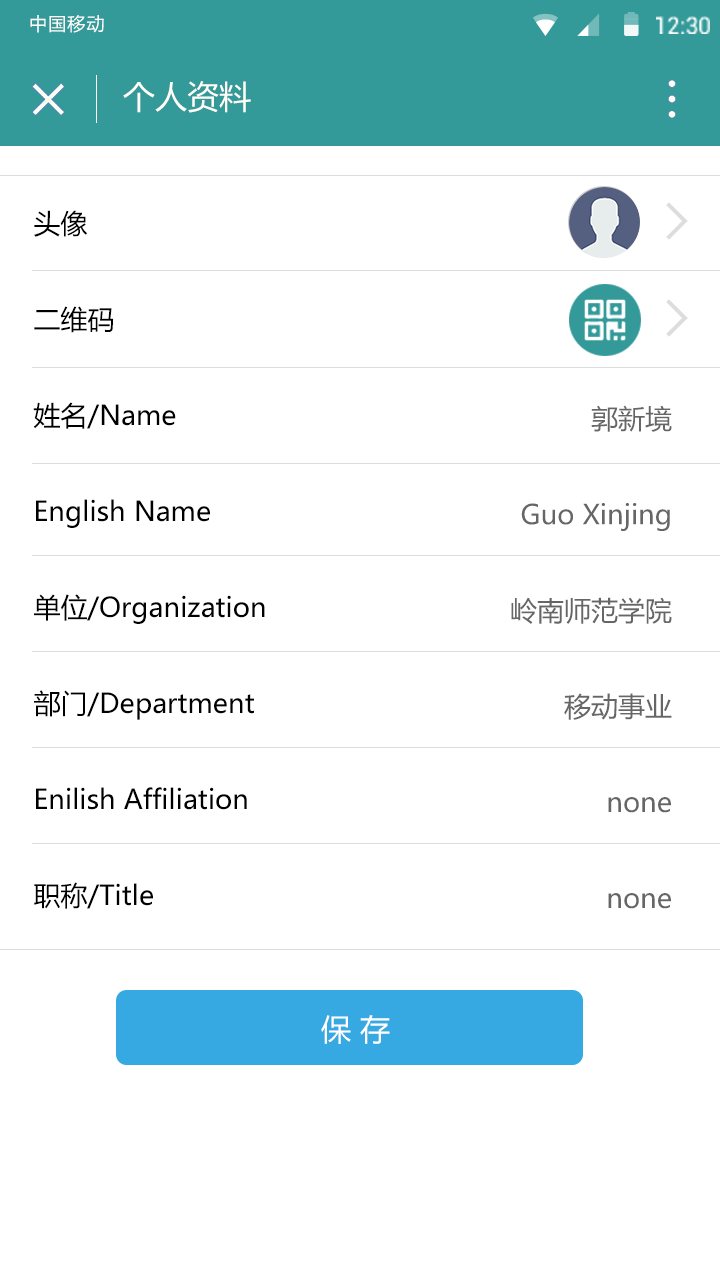
<style>
.page{position:relative;width:720px;height:1280px;background:#ffffff}
.page>*{position:absolute;margin:0}
.t1{font:17.9px "MicrosoftYaHei";letter-spacing:0.065em;color:#ffffff}
.t2{font:32px "MicrosoftYaHei";color:#fefdf8}
.t3{font:27px/96px "MicrosoftYaHei";color:#000000}
.t4{font:27px/96px "MicrosoftYaHei";color:#666666}
.t5{font:30px "MicrosoftYaHei";color:#ffffff}
</style>
<div class="page">
<p class="t1" style="left:30px;top:15px;width:74px;height:18px">中国移动</p>
<p class="t2" style="left:123px;top:81px;width:128px;height:32px">个人资料</p>
<p class="t3" style="left:33px;top:210px;width:232px;height:699px">头像<br>二维码<br>姓名/Name<br>English Name<br>单位/Organization<br>部门/Department<br>Enilish Affiliation<br>职称/Title</p>
<p class="t4" style="left:511px;top:405px;width:161px;height:504px;text-align:right">郭新境<br>Guo Xinjing<br>岭南师范学院<br>移动事业<br>none<br>none</p>
<p class="t5" style="left:321px;top:1015px;width:69px;height:29px">保 存</p>
</div>
